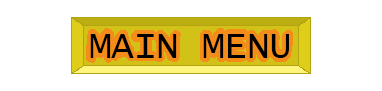
<style>
.page{position:relative;width:382px;height:91px;background:#ffffff}
.page>*{position:absolute;margin:0}
.t1{font:37.5px "LucidaConsole";color:#000000}
</style>
<div class="page">
<p class="t1" style="left:90px;top:34px;width:199px;height:24px">MAIN MENU</p>
</div>
